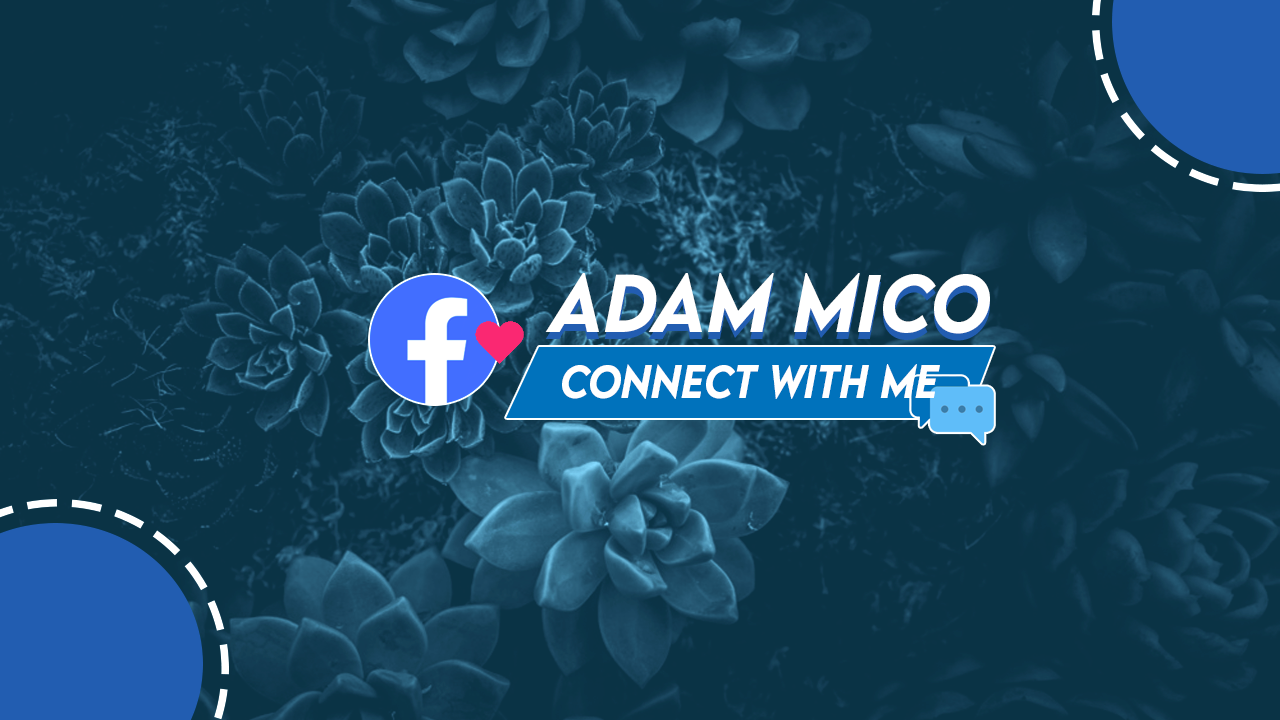
<style>
.page{position:relative;width:1280px;height:720px;background:#0a3345}
.page>*{position:absolute;margin:0}
.t1{font:72.6px "LEMONMILK-MediumItalic";color:#ffffff}
.t2{font:41px "LEMONMILK-MediumItalic";color:#ffffff}
</style>
<div class="page">
<p class="t1" style="left:545px;top:280px;width:445px;height:61px">ADAM MICO</p>
<p class="t1" style="left:545px;top:273px;width:445px;height:61px">ADAM MICO</p>
<p class="t2" style="left:562px;top:364px;width:378px;height:35px">connect with me</p>
</div>
